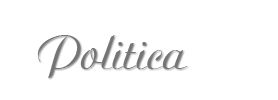
<style>
.page{position:relative;width:278px;height:100px;background:#ffffff}
.page>*{position:absolute;margin:0}
.t1{font:48px "Ariston-Normal";color:#757575}
</style>
<div class="page">
<p class="t1" style="left:37px;top:35px;width:151px;height:43px">Politica</p>
</div>
